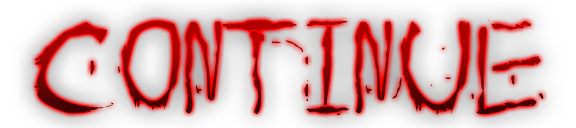
<style>
.page{position:relative;width:576px;height:128px}
.page>*{position:absolute;margin:0}
.t1{font:133.2px "AboutDead"}
</style>
<div class="page">
<p class="t1" style="left:33px;top:20px;width:511px;height:96px">Continue</p>
</div>
